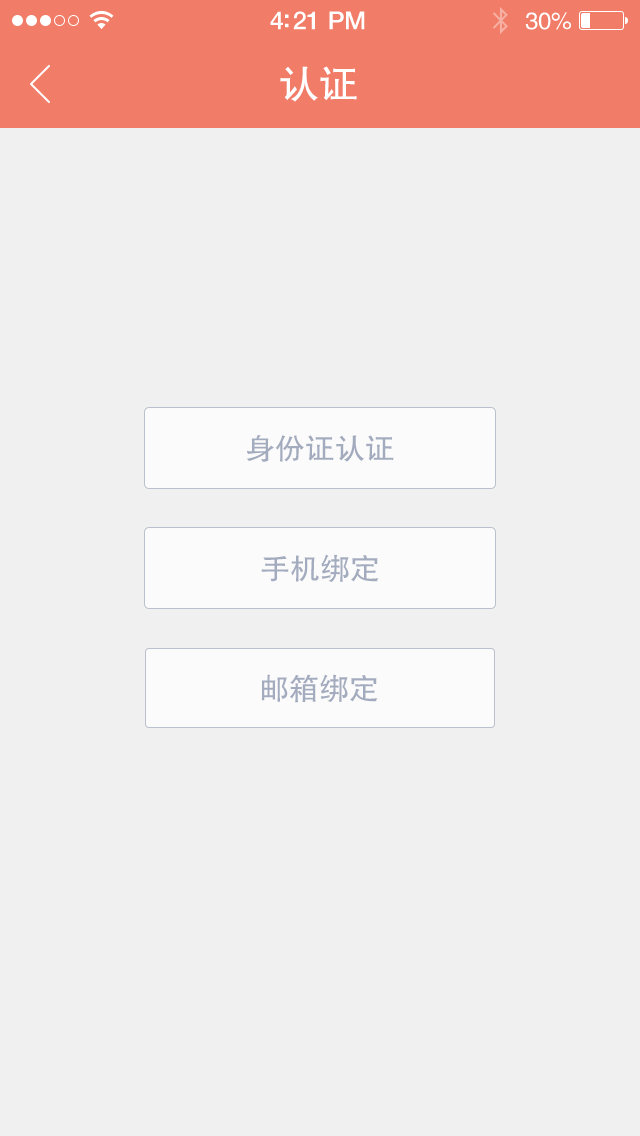
<style>
.page{position:relative;width:640px;height:1136px;background:#f0f0f0}
.page>*{position:absolute;margin:0}
.t1{font:25px "HelveticaNeue-Medium";letter-spacing:-0.02em;color:#ffffff}
.t2{font:24px "FZHTJW--GB1-0";letter-spacing:-0.02em;color:#ffffff}
.t3{font:40px "FZHTJW--GB1-0";color:#ffffff}
.t4{font:30px "FZHTJW--GB1-0";color:#a3abbe}
</style>
<div class="page">
<p class="t1" style="left:270px;top:11px;width:95px;height:19px">4:21 PM</p>
<p class="t2" style="left:525px;top:12px;width:46px;height:18px">30%</p>
<p class="t3" style="left:280px;top:66px;width:77px;height:36px">认证</p>
<p class="t4" style="left:246px;top:435px;width:148px;height:27px">身份证认证</p>
<p class="t4" style="left:261px;top:554px;width:118px;height:28px">手机绑定</p>
<p class="t4" style="left:261px;top:674px;width:117px;height:29px">邮箱绑定</p>
</div>
